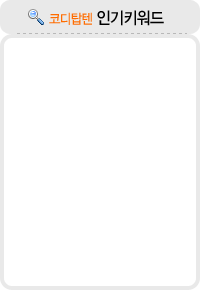
<style>
.page{position:relative;width:200px;height:290px;background:#ffffff}
.page>*{position:absolute;margin:0}
.t1{font:17px "YDIYGO330";letter-spacing:-0.05em;color:#000000;scale:0.91 1}
.t2{font:13.8px "YDIYGO330";letter-spacing:-0.05em;color:#ff6c00;scale:0.91 1}
</style>
<div class="page">
<p class="t1" style="left:49px;top:10px;width:115px;height:16px"><span class="t2">코디탑텐 </span>인기키워드</p>
</div>
